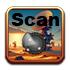
<style>
.page{position:relative;width:70px;height:70px;background:#ffffff}
.page>*{position:absolute;margin:0}
.t1{font:18px "Arial-Black";color:#000000}
</style>
<div class="page">
<p class="t1" style="left:11px;top:13px;width:48px;height:13px">Scan</p>
</div>
